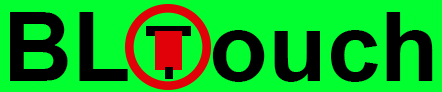
<style>
.page{position:relative;width:442px;height:92px;background:#02ff30}
.page>*{position:absolute;margin:0}
.t1{font:96px "Arial-BoldMT";color:#000000}
</style>
<div class="page">
<p class="t1" style="left:10px;top:12px;width:423px;height:70px">BL   ouch</p>
</div>
